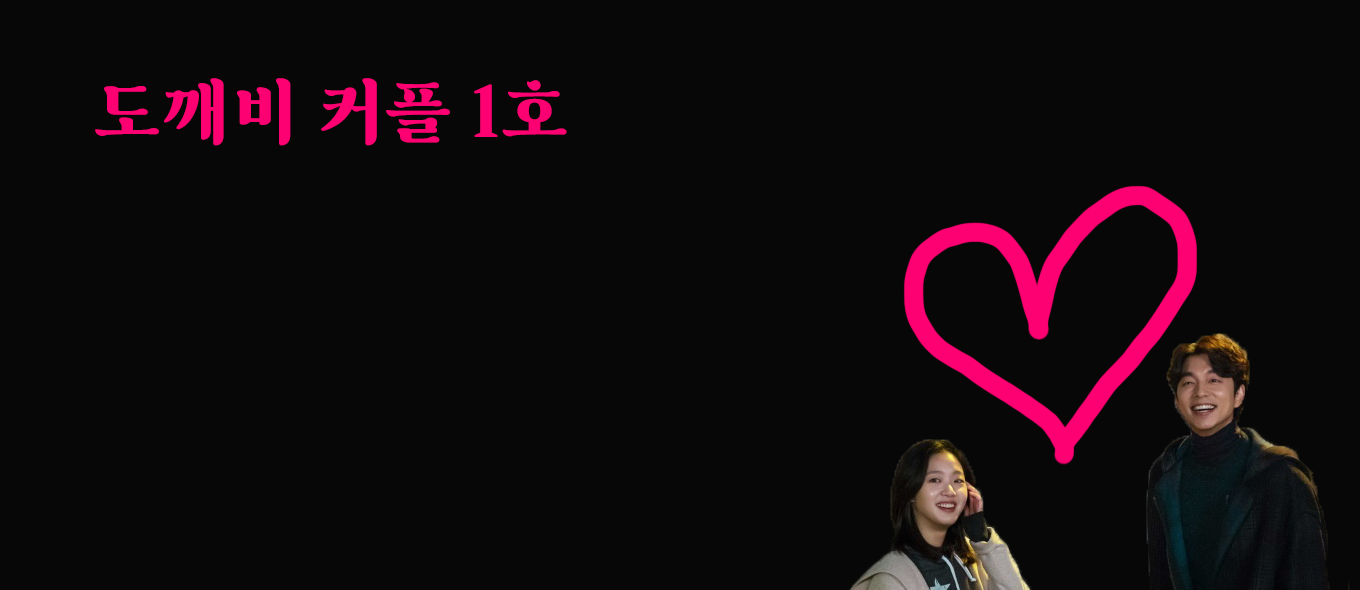
<style>
.page{position:relative;width:1360px;height:590px;background:#070707}
.page>*{position:absolute;margin:0}
.t1{font:72px "SF_HambakSnow";color:#fd0071}
</style>
<div class="page">
<p class="t1" style="left:95px;top:78px;width:472px;height:68px">도깨비 커플 1호</p>
</div>
